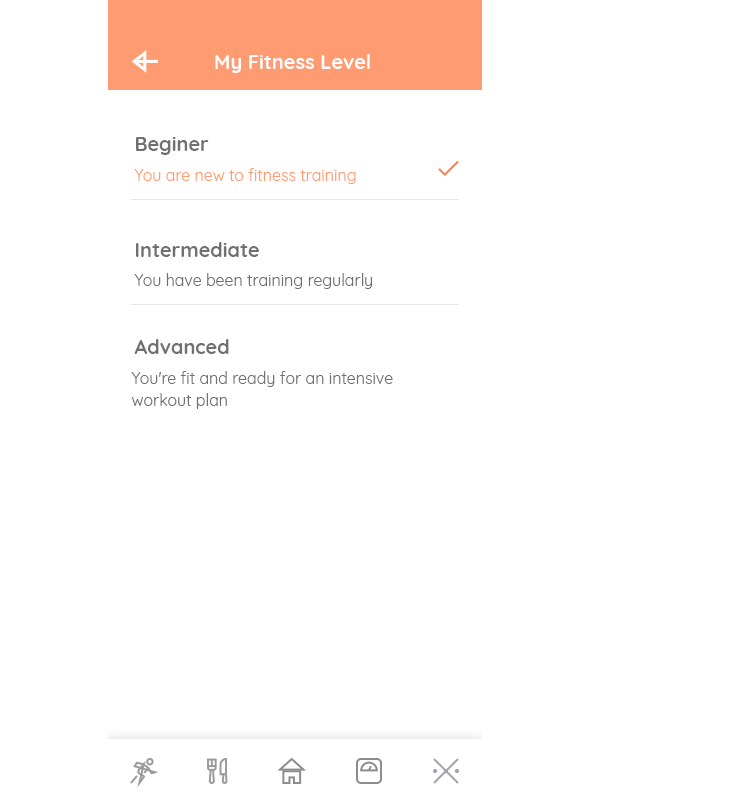
<style>
.page{position:relative;width:743px;height:812px;background:#ffffff}
.page>*{position:absolute;margin:0}
.t1{font:20px "Quicksand-Bold";color:#ffffff}
.t2{font:20px "Quicksand-Bold";color:#707070}
.t3{font:16px "Quicksand-Regular";color:#ff9b70}
.t4{font:16px "Quicksand-Regular";color:#707070}
.t5{font:16px/22px "Quicksand-Regular";color:#707070}
</style>
<div class="page">
<p class="t1" style="left:215px;top:54px;width:155px;height:19px">My Fitness Level</p>
<p class="t2" style="left:136px;top:137px;width:73px;height:18px">Beginer</p>
<p class="t3" style="left:134px;top:168px;width:222px;height:16px">You are new to fitness training</p>
<p class="t2" style="left:136px;top:242px;width:123px;height:15px">Intermediate</p>
<p class="t4" style="left:134px;top:273px;width:238px;height:16px">You have been training regularly</p>
<p class="t2" style="left:134px;top:339px;width:95px;height:15px">Advanced</p>
<p class="t5" style="left:131px;top:371px;width:262px;height:38px">You're fit and ready for an intensive <br>workout plan</p>
</div>
